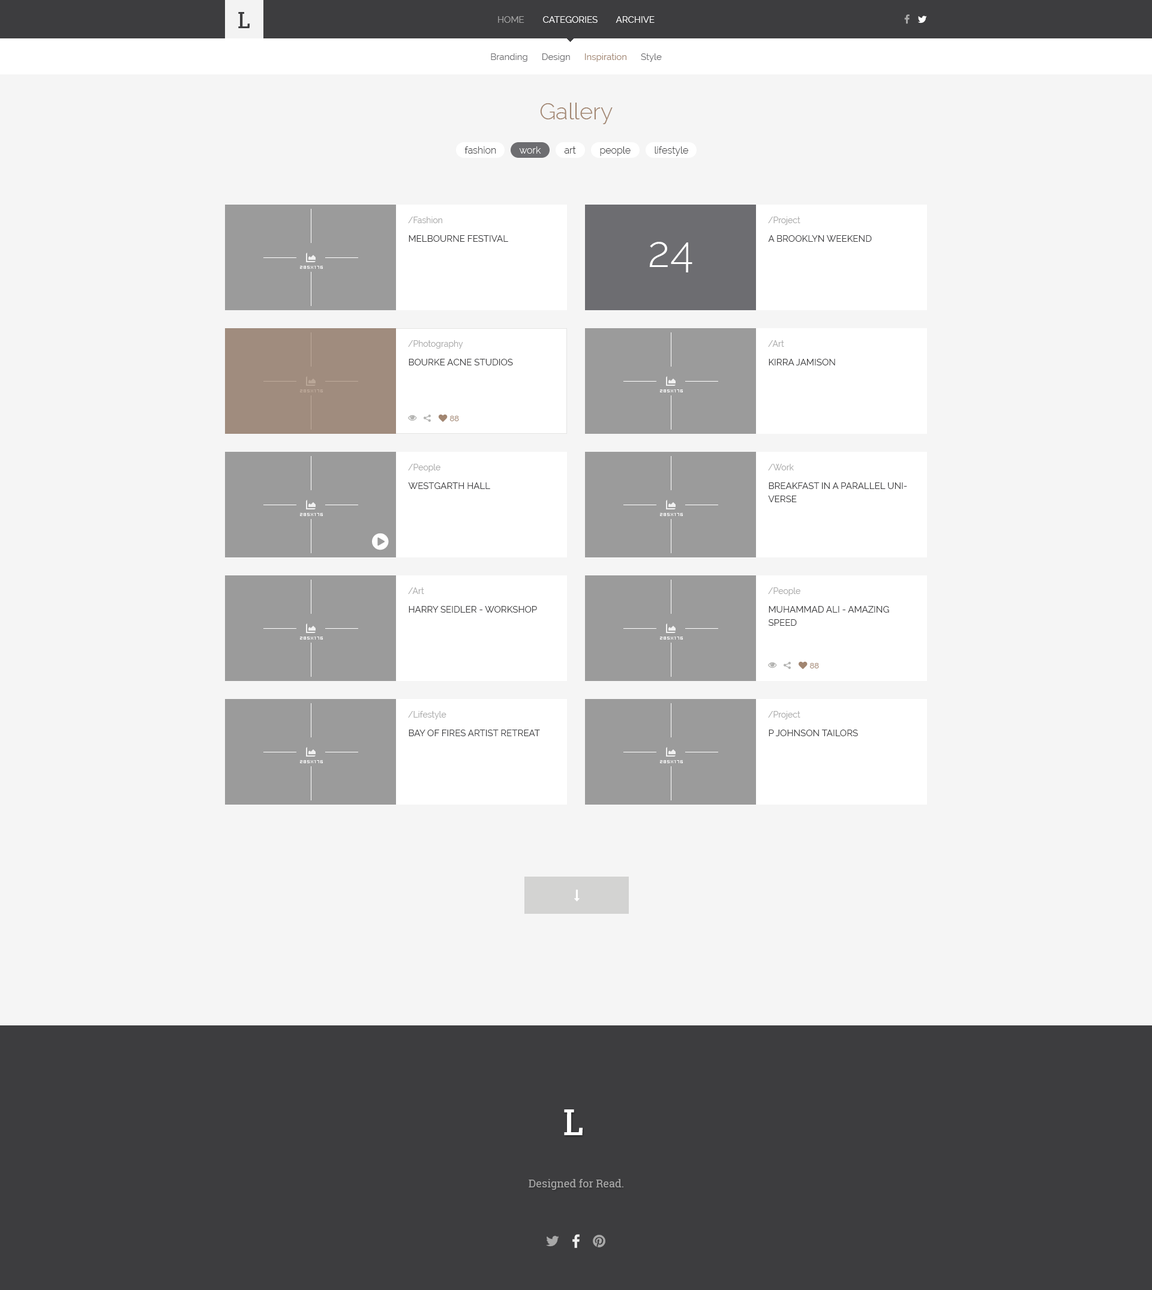
<style>
.page{position:relative;width:1152px;height:1290px;background:#f5f5f5}
.page>*{position:absolute;margin:0}
.t1{font:9px "Raleway";color:#ffffff}
.t2{font:9px "Raleway";color:#a8a8a8}
.t3{font:9px "Raleway";color:#6d6d70}
.t4{font:9px "Raleway";color:#a28671}
.t5{font:22.8px "Raleway-Light";color:#a28671}
.t6{font:9.6px "Raleway-Light";color:#3d3d3f}
.t7{font:9.6px "Raleway-Light";color:#ffffff}
.t8{font:8.4px "Raleway";color:#a9a9a9}
.t9{font:9px "Raleway";color:#3d3d3f;text-transform:uppercase}
.t10{font:43.2px "Raleway-Light";color:#ffffff}
.t11{font:7.8px "Raleway";color:#a28671}
.t12{font:9px/13.2px "Raleway";color:#3d3d3f;text-transform:uppercase}
</style>
<div class="page">
<p class="t1" style="left:498px;top:16px;width:157px;height:7px"><span class="t2">HOME</span>        CATEGORIES        ARCHIVE</p>
<p class="t3" style="left:491px;top:53px;width:171px;height:9px">Branding      Design      <span class="t4">Inspiration </span>     Style</p>
<p class="t5" style="left:540px;top:103px;width:73px;height:21px">Gallery</p>
<p class="t6" style="left:464px;top:146px;width:32px;height:8px">fashion</p>
<p class="t7" style="left:519px;top:146px;width:22px;height:8px">work</p>
<p class="t6" style="left:564px;top:146px;width:12px;height:8px">art</p>
<p class="t6" style="left:600px;top:146px;width:31px;height:10px">people</p>
<p class="t6" style="left:655px;top:146px;width:33px;height:10px">lifestyle</p>
<p class="t8" style="left:408px;top:217px;width:34px;height:6px">/Fashion</p>
<p class="t8" style="left:768px;top:217px;width:32px;height:8px">/Project</p>
<p class="t9" style="left:409px;top:235px;width:99px;height:7px">Melbourne Festival</p>
<p class="t10" style="left:649px;top:242px;width:43px;height:30px">24</p>
<p class="t9" style="left:768px;top:235px;width:104px;height:7px">A Brooklyn Weekend</p>
<p class="t8" style="left:408px;top:340px;width:55px;height:9px">/Photography</p>
<p class="t8" style="left:768px;top:340px;width:16px;height:7px">/Art</p>
<p class="t9" style="left:409px;top:359px;width:104px;height:6px">Bourke Acne Studios</p>
<p class="t9" style="left:769px;top:359px;width:66px;height:6px">Kirra Jamison</p>
<p class="t11" style="left:450px;top:416px;width:9px;height:5px">88</p>
<p class="t8" style="left:408px;top:464px;width:32px;height:8px">/People</p>
<p class="t8" style="left:768px;top:464px;width:26px;height:6px">/Work</p>
<p class="t9" style="left:408px;top:482px;width:82px;height:7px">Westgarth Hall</p>
<p class="t12" style="left:768px;top:482px;width:139px;height:20px">Breakfast in a Parallel Universe</p>
<p class="t8" style="left:408px;top:587px;width:16px;height:7px">/Art</p>
<p class="t8" style="left:768px;top:587px;width:32px;height:9px">/People</p>
<p class="t9" style="left:409px;top:606px;width:128px;height:7px">Harry Seidler - Workshop</p>
<p class="t12" style="left:768px;top:606px;width:121px;height:20px">Muhammad Ali - Amazing Speed</p>
<p class="t11" style="left:810px;top:663px;width:9px;height:5px">88</p>
<p class="t8" style="left:408px;top:711px;width:38px;height:8px">/Lifestyle</p>
<p class="t8" style="left:768px;top:711px;width:32px;height:8px">/Project</p>
<p class="t9" style="left:409px;top:730px;width:131px;height:6px">Bay of Fires Artist Retreat</p>
<p class="t9" style="left:769px;top:730px;width:89px;height:6px">P Johnson Tailors</p>
</div>
